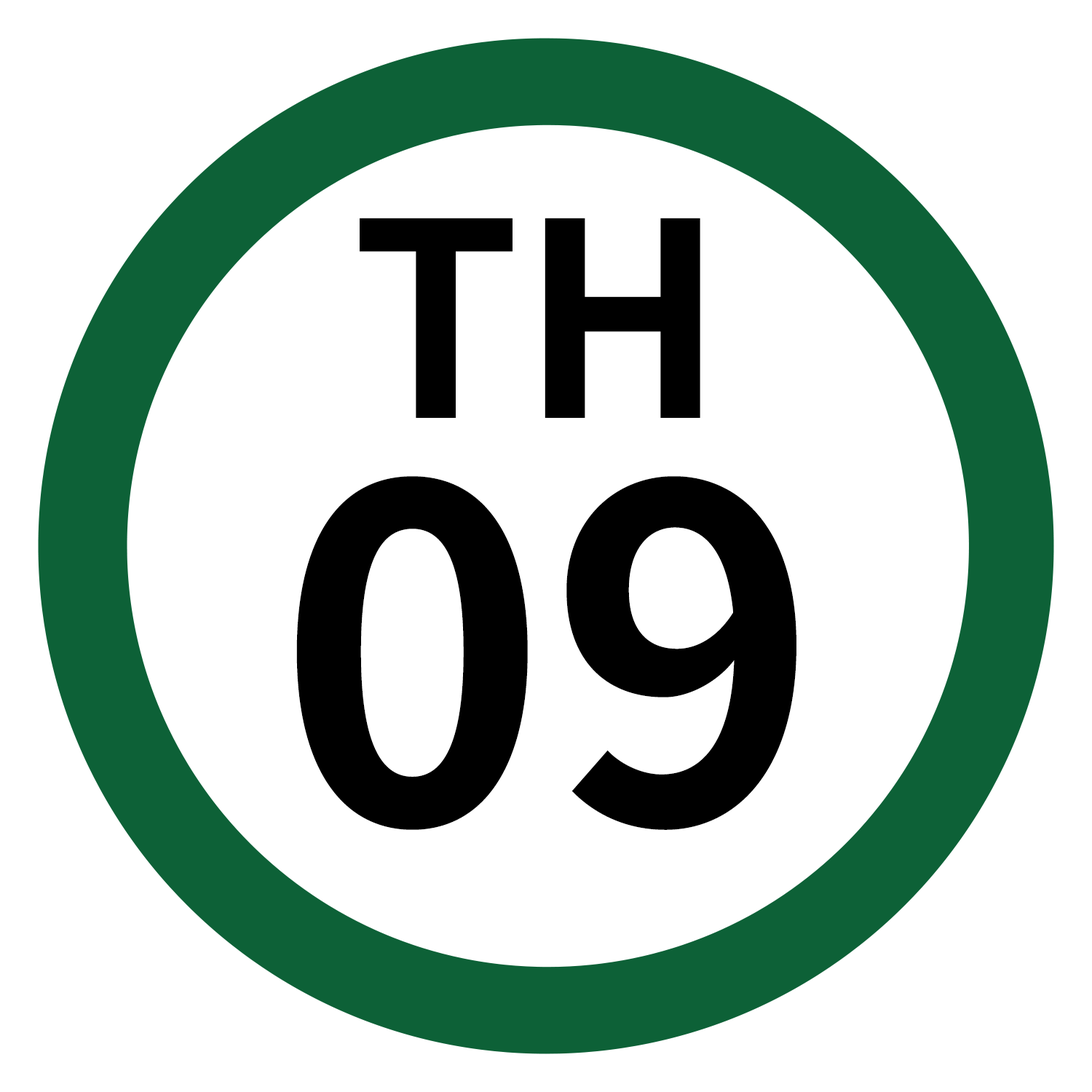
<style>
.page{position:relative;width:1092px;height:1092px;background:#ffffff}
.page>*{position:absolute;margin:0}
.t1{font:269.8px "NotoSansJP-Bold";color:#000000}
.t2{font:460.5px "NotoSansJP-Bold";color:#000000}
</style>
<div class="page">
<p class="t1" style="left:360px;top:218px;width:340px;height:200px">TH</p>
<p class="t2" style="left:296px;top:476px;width:500px;height:354px">09</p>
</div>
